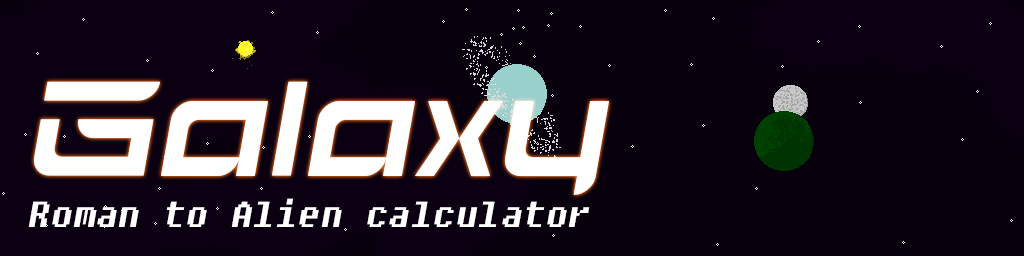
<style>
.page{position:relative;width:1024px;height:256px;background:#08000d}
.page>*{position:absolute;margin:0}
.t1{font:150px "TESLA";color:#ffffff;font-style:italic}
.t2{font:36px "Fixedsys";color:#ffffff;font-style:italic}
</style>
<div class="page">
<p class="t1" style="left:33px;top:81px;width:576px;height:114px">Galaxy</p>
<p class="t2" style="left:28px;top:198px;width:562px;height:29px">Roman to Alien calculator</p>
</div>
